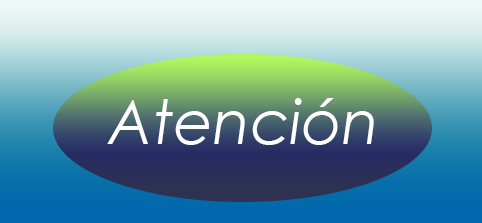
<style>
.page{position:relative;width:482px;height:223px}
.page>*{position:absolute;margin:0}
.t1{font:61px "CenturyGothic-Italic";color:#ffffff}
</style>
<div class="page">
<p class="t1" style="left:107px;top:98px;width:267px;height:47px">Atención</p>
</div>
